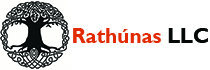
<style>
.page{position:relative;width:210px;height:70px;background:#ffffff}
.page>*{position:absolute;margin:0}
.t1{font:20.8px "GillSansMT-Bold";color:#e32b00}
.t2{font:20.8px "GillSansMT-Bold";color:#060808}
</style>
<div class="page">
<p class="t1" style="left:73px;top:28px;width:135px;height:15px">Rathúnas <span class="t2">LLC</span></p>
</div>
